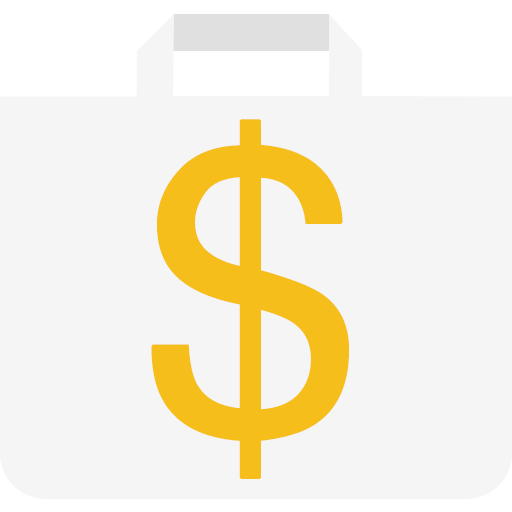
<style>
.page{position:relative;width:512px;height:512px;background:#f5f5f5}
.page>*{position:absolute;margin:0}
.t1{font:400px "Helvetica";letter-spacing:-0.04em;color:#f6be1a;font-weight:bold}
</style>
<div class="page">
<p class="t1" style="left:151px;top:119px;width:198px;height:360px">$</p>
</div>
